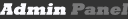
<style>
.page{position:relative;width:128px;height:19px;background:#333333}
.page>*{position:absolute;margin:0}
.t1{font:16.4px "Rockwell-ExtraBold";letter-spacing:0.01em;color:#fafafe;font-style:italic}
.t2{font:16.4px "Rockwell-ExtraBold";letter-spacing:0.01em;color:#777778;font-style:italic}
</style>
<div class="page">
<p class="t1" style="left:0px;top:3px;width:129px;height:12px">Admin <span class="t2">Panel</span></p>
</div>
